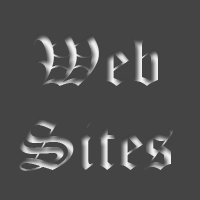
<style>
.page{position:relative;width:200px;height:200px;background:#444444}
.page>*{position:absolute;margin:0}
.t1{font:70px "OldEnglishTextMT"}
</style>
<div class="page">
<p class="t1" style="left:18px;top:34px;width:155px;height:137px;text-align:center">Web<br>Sites</p>
</div>
